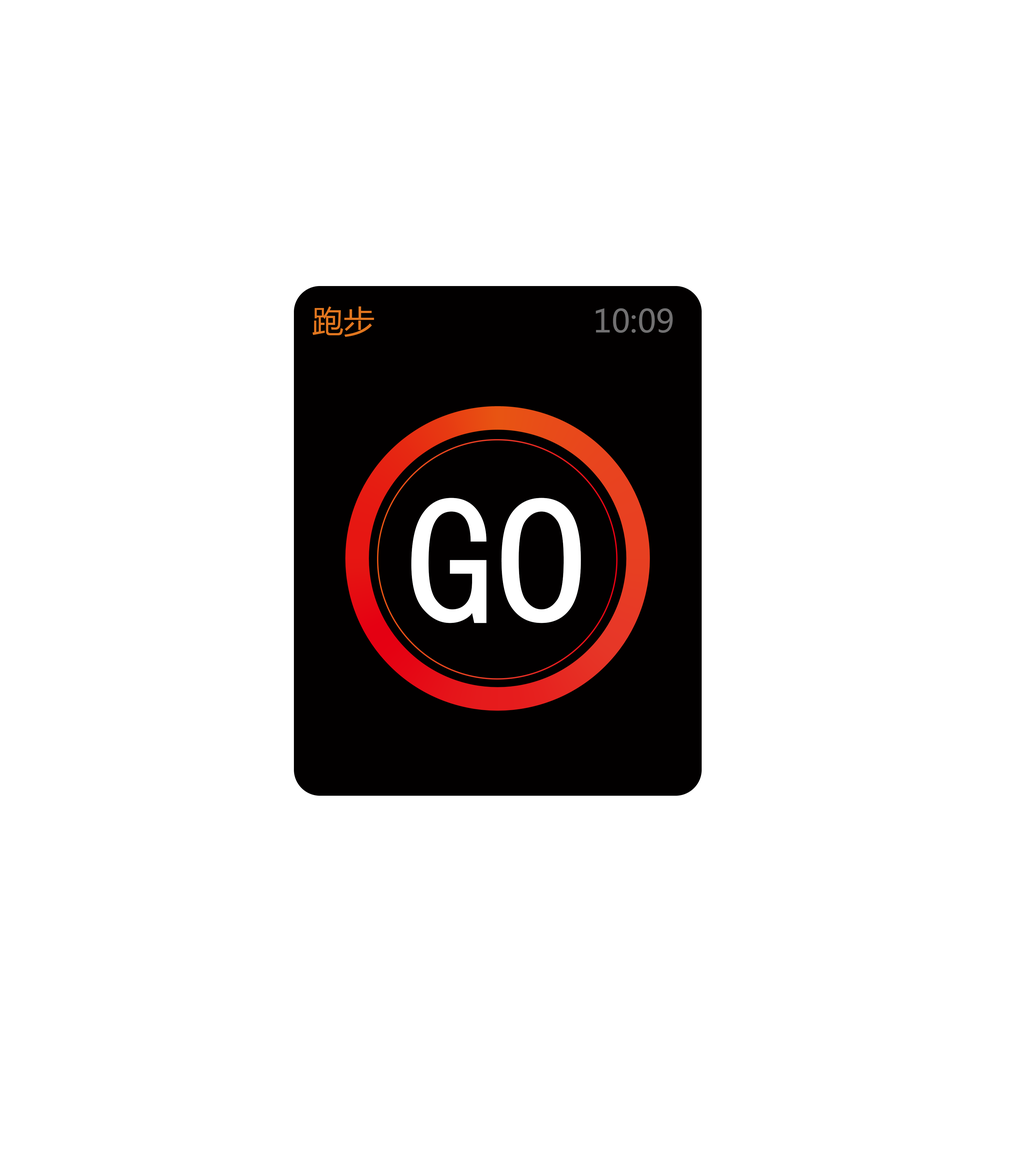
<style>
.page{position:relative;width:1026px;height:1163px;background:#ffffff}
.page>*{position:absolute;margin:0}
.t1{font:31.4px "MicrosoftYaHei";color:#e1761f}
.t2{font:31.4px "MicrosoftYaHei";color:#717071}
.t3{font:182.9px "SimHei";color:#ffffff}
</style>
<div class="page">
<p class="t1" style="left:312px;top:306px;width:62px;height:31px">跑步</p>
<p class="t2" style="left:595px;top:308px;width:78px;height:25px">10:09</p>
<p class="t3" style="left:411px;top:498px;width:170px;height:125px">GO</p>
</div>
